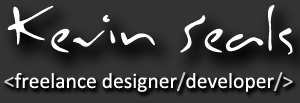
<style>
.page{position:relative;width:300px;height:103px;background:#333333}
.page>*{position:absolute;margin:0}
.t1{font:65.1px "Inkburrow";color:#ffffff}
.t2{font:21.7px "Calibri";color:#ffffff}
.t3{font:21.7px "Calibri";color:#cccccc}
</style>
<div class="page">
<p class="t1" style="left:7px;top:4px;width:286px;height:51px">Kevin Seals</p>
<p class="t2" style="left:4px;top:72px;width:289px;height:20px"><span class="t3">&lt;</span>freelance designer<span class="t3">/</span>developer<span class="t3">/&gt;</span></p>
</div>
